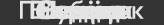
<style>
.page{position:relative;width:164px;height:25px;background:#333333}
.page>*{position:absolute;margin:0}
.t1{font:24.9px "GoogleSansDisplay-Medium";color:#e4e4e4}
</style>
<div class="page">
<p class="t1" style="left:20px;top:0px;width:124px;height:23px">Понеділок</p>
<p class="t1" style="left:31px;top:0px;width:102px;height:25px">Вівторок</p>
<p class="t1" style="left:31px;top:0px;width:100px;height:23px">П'ятниця</p>
<p class="t1" style="left:36px;top:0px;width:90px;height:25px">Середа</p>
<p class="t1" style="left:38px;top:0px;width:85px;height:25px">Субота</p>
<p class="t1" style="left:40px;top:0px;width:82px;height:25px">Четвер</p>
<p class="t1" style="left:41px;top:0px;width:80px;height:23px">Неділя</p>
</div>
